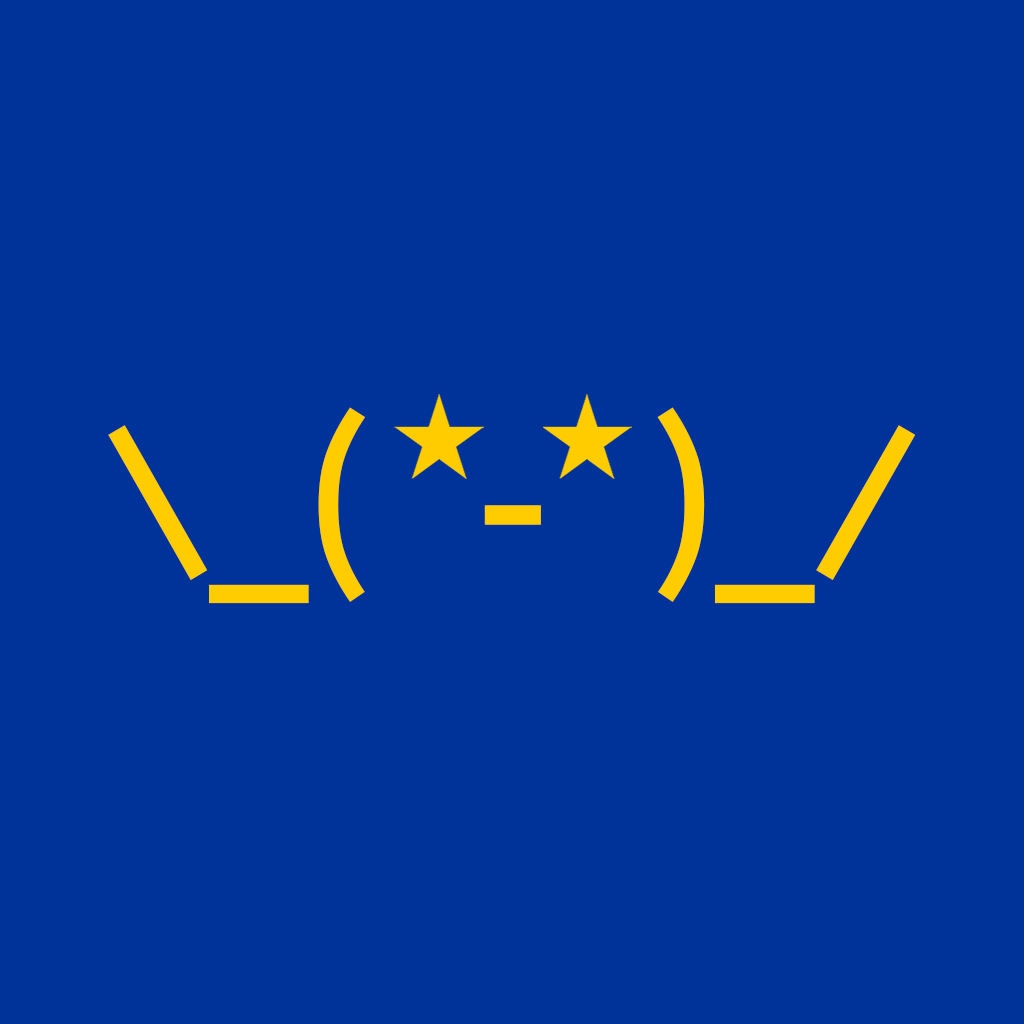
<style>
.page{position:relative;width:1024px;height:1024px;background:#003399}
.page>*{position:absolute;margin:0}
.t1{font:199.4px "Lekton-Bold";color:#ffcc00}
</style>
<div class="page">
<p class="t1" style="left:108px;top:407px;width:808px;height:197px">\_( - )_/</p>
</div>
